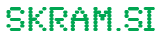
<style>
.page{position:relative;width:161px;height:38px;background:#ffffff}
.page>*{position:absolute;margin:0}
.t1{font:36px "SynchroLET";color:#00a651}
</style>
<div class="page">
<p class="t1" style="left:6px;top:7px;width:149px;height:24px">Skram.si</p>
</div>
